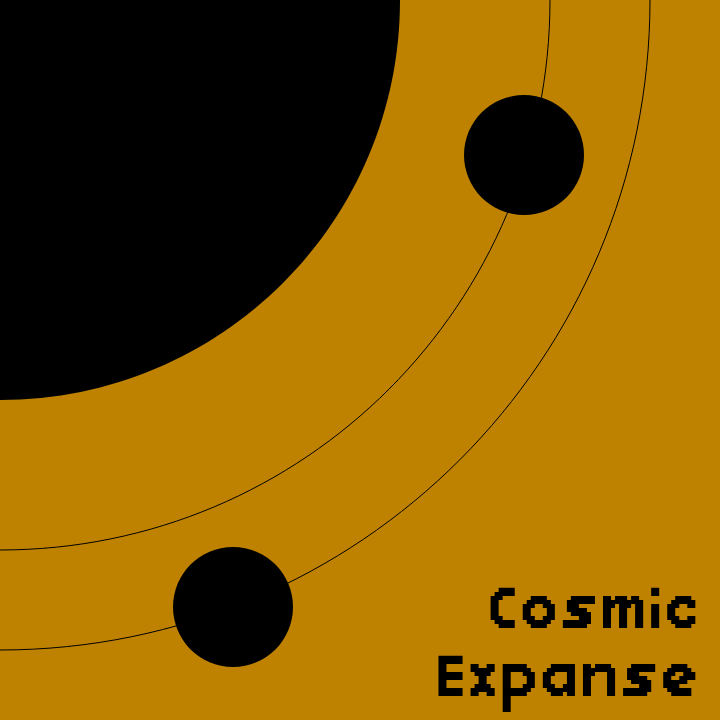
<style>
.page{position:relative;width:720px;height:720px;background:#bf8200}
.page>*{position:absolute;margin:0}
.t1{font:56.2px "StarboundFont";color:#000000}
</style>
<div class="page">
<p class="t1" style="left:438px;top:587px;width:258px;height:125px;text-align:right">Cosmic<br>Expanse</p>
</div>
